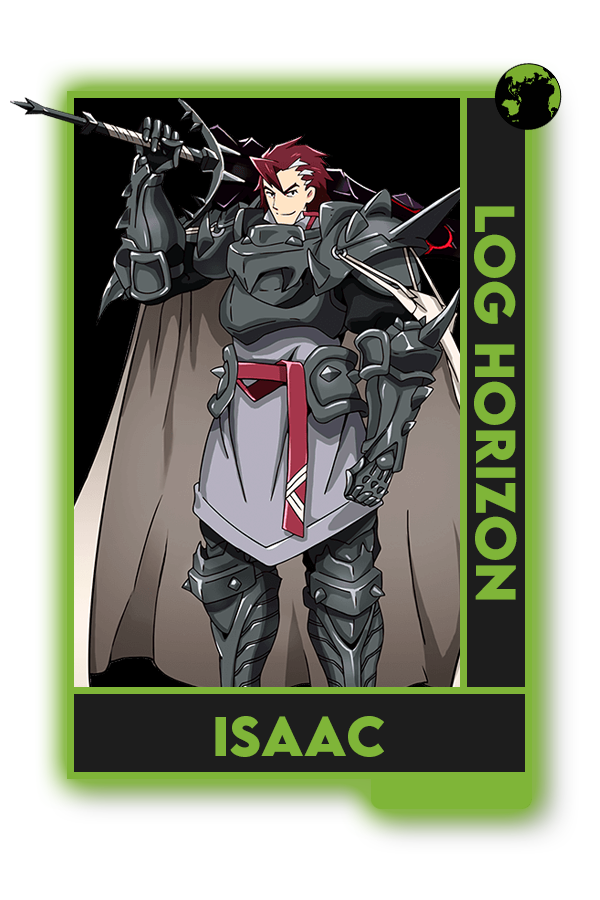
<style>
.page{position:relative;width:600px;height:900px;background:#ffffff}
.page>*{position:absolute;margin:0}
.t1{font:50px "LEMONMILK-Bold";color:#7fad41}
</style>
<div class="page">
<p class="t1" style="left:474px;top:206px;width:43px;height:394px;rotate:90deg">Log Horizon</p>
<p class="t1" style="left:215px;top:716px;width:169px;height:41px">Isaac</p>
</div>
